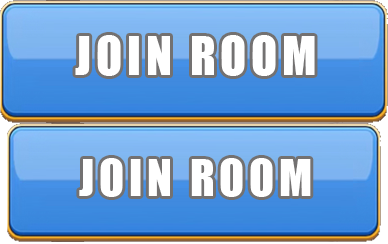
<style>
.page{position:relative;width:388px;height:244px}
.page>*{position:absolute;margin:0}
.t1{font:49px "Impact";letter-spacing:0.1em;color:#ffffff}
.t2{font:47.4px "Impact";letter-spacing:0.1em;color:#ffffff}
</style>
<div class="page">
<p class="t1" style="left:75px;top:35px;width:240px;height:41px">JOIN ROOM</p>
<p class="t2" style="left:79px;top:158px;width:232px;height:39px">JOIN ROOM</p>
</div>
